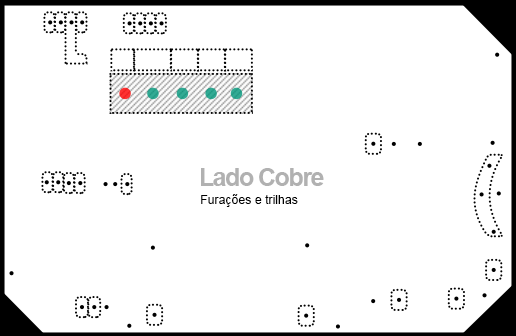
<style>
.page{position:relative;width:516px;height:336px;background:#ffffff}
.page>*{position:absolute;margin:0}
.t1{font:24.6px "Arial-BoldMT";letter-spacing:-0.05em;color:#b1b1b1}
.t2{font:12.3px "ArialMT";color:#000000}
</style>
<div class="page">
<p class="t1" style="left:201px;top:168px;width:123px;height:18px">Lado Cobre</p>
<p class="t2" style="left:201px;top:194px;width:97px;height:13px">Furações e trilhas</p>
</div>
